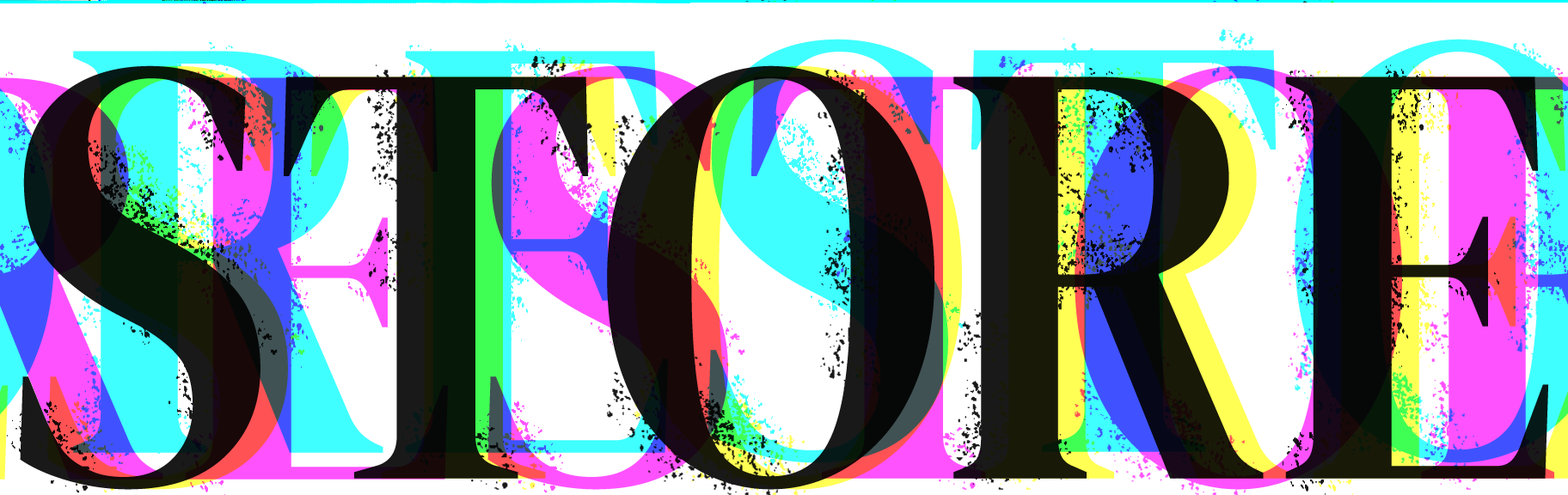
<style>
.page{position:relative;width:1568px;height:495px;background:#ffffff}
.page>*{position:absolute;margin:0}
.t1{font:608.1px "DMSerifDisplay-Regular";letter-spacing:0.012em;color:#060808;scale:0.85 1}
</style>
<div class="page">
<p class="t1" style="left:20px;top:36px;width:1529px;height:425px">STORE</p>
</div>
